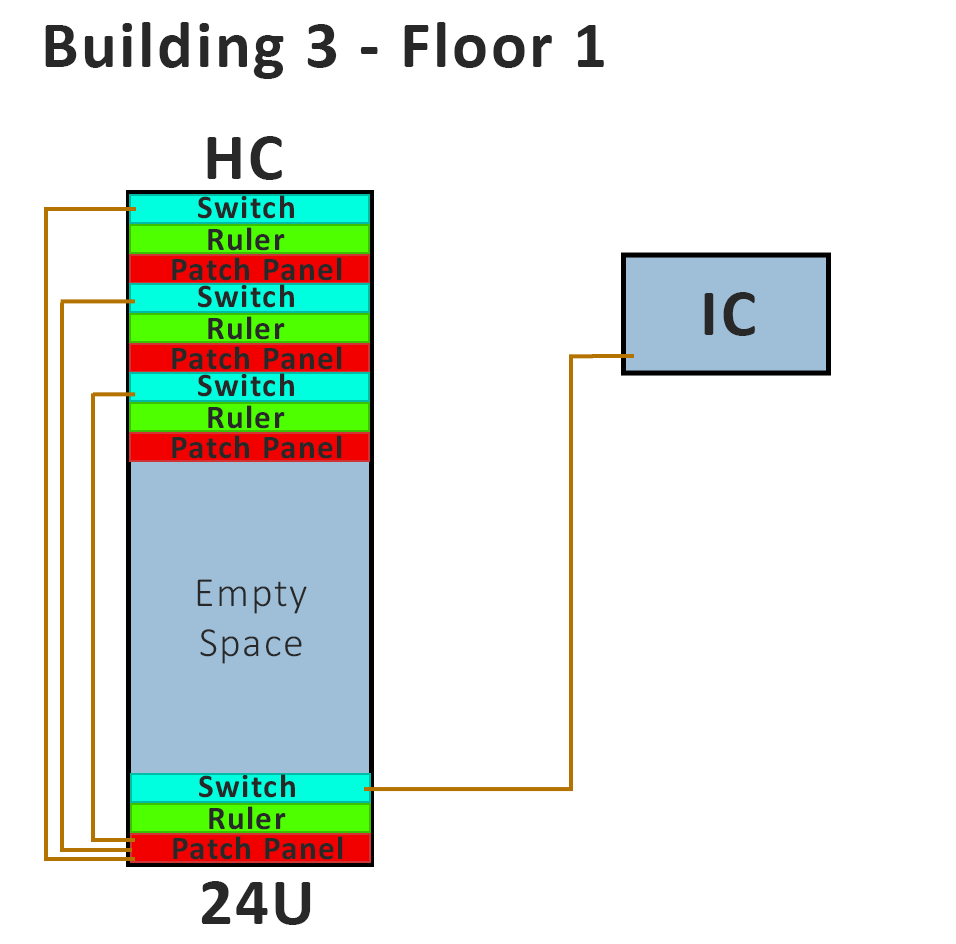
<style>
.page{position:relative;width:956px;height:944px;background:#ffffff}
.page>*{position:absolute;margin:0}
.t1{font:66.7px "Calibri-Bold";letter-spacing:0.04em;color:#282828}
.t2{font:33.3px "Calibri-Bold";letter-spacing:0.04em;color:#282828}
.t3{font:41.6px "Calibri-Light";letter-spacing:0.04em;color:#282828}
</style>
<div class="page">
<p class="t1" style="left:45px;top:22px;width:559px;height:57px">Building 3 - Floor 1</p>
<p class="t1" style="left:207px;top:136px;width:75px;height:44px">HC</p>
<p class="t2" style="left:198px;top:195px;width:96px;height:24px">Switch</p>
<p class="t2" style="left:208px;top:227px;width:77px;height:24px">Ruler</p>
<p class="t2" style="left:172px;top:257px;width:170px;height:24px">Patch Panel</p>
<p class="t2" style="left:198px;top:284px;width:96px;height:24px">Switch</p>
<p class="t1" style="left:704px;top:292px;width:51px;height:44px">IC</p>
<p class="t2" style="left:208px;top:316px;width:77px;height:24px">Ruler</p>
<p class="t2" style="left:172px;top:346px;width:170px;height:24px">Patch Panel</p>
<p class="t2" style="left:198px;top:373px;width:96px;height:24px">Switch</p>
<p class="t2" style="left:208px;top:405px;width:77px;height:24px">Ruler</p>
<p class="t2" style="left:172px;top:435px;width:170px;height:24px">Patch Panel</p>
<p class="t3" style="left:197px;top:579px;width:110px;height:85px;text-align:center">Empty<br>Space</p>
<p class="t2" style="left:199px;top:774px;width:96px;height:24px">Switch</p>
<p class="t2" style="left:209px;top:806px;width:77px;height:24px">Ruler</p>
<p class="t2" style="left:173px;top:836px;width:170px;height:24px">Patch Panel</p>
<p class="t1" style="left:201px;top:881px;width:110px;height:44px">24U</p>
</div>
